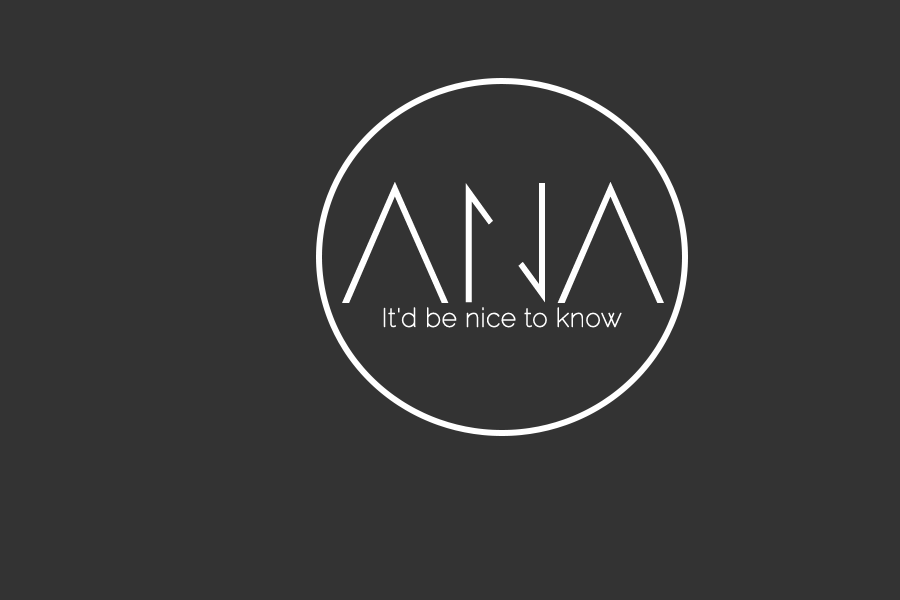
<style>
.page{position:relative;width:900px;height:600px;background:#333333}
.page>*{position:absolute;margin:0}
.t1{font:209.4px "AndarilhoFont";letter-spacing:-0.12em;color:#ffffff;scale:1.04 1}
.t2{font:25.9px "Raleway-Thin";color:#ffffff;font-weight:bold}
</style>
<div class="page">
<p class="t1" style="left:342px;top:182px;width:322px;height:121px">ANA</p>
<p class="t2" style="left:383px;top:307px;width:239px;height:21px">It'd be nice to know</p>
</div>
